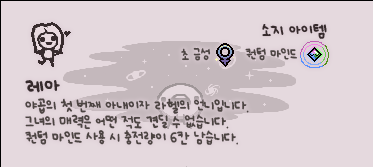
<style>
.page{position:relative;width:373px;height:167px;background:#e5d9de}
.page>*{position:absolute;margin:0}
.t1{font:12px "UhBeeSe_hyunBold";color:#372b2d}
.t2{font:12px "UhBeeSe_hyunBold";letter-spacing:-0.1em;color:#372b2d}
.t3{font:10px "UhBeeSe_hyunBold";color:#4c4442}
.t4{font:10px "UhBeeSe_hyunBold";letter-spacing:-0.1em;color:#4c4442}
.t5{font:11px/16px "UhBeeSe_hyunBold";letter-spacing:-0.025em;color:#4c4442}
.t6{font:16px/23px "UhBeeSe_hyunBold";color:#372b2d}
.t7{font:11px/16px "UhBeeSe_hyun";letter-spacing:-0.025em;color:#4c4442}
</style>
<div class="page">
<p class="t1" style="left:262px;top:24px;width:65px;height:15px"><span class="t2">소</span>지 아이템</p>
<p class="t3" style="left:181px;top:47px;width:30px;height:14px">초 금성</p>
<p class="t3" style="left:245px;top:47px;width:52px;height:14px">퀀텀 <span class="t4">마</span>인드</p>
<p class="t5" style="left:25px;top:80px;width:224px;height:65px"><span class="t6">레아<br></span>야<span class="t7">곱</span>의 첫 번째 아내이자 라헬의 언니입니다. <br>그녀의 매력은 어떤 적도 견딜 수 없습니다.<br>퀀텀 마인드 사용 시 충전량이 6칸 남습니다.</p>
</div>
